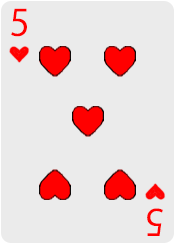
<style>
.page{position:relative;width:175px;height:244px;background:#ebebeb}
.page>*{position:absolute;margin:0}
.t1{font:36px "KozGoPr6N-Regular";color:#ff0000}
</style>
<div class="page">
<p class="t1" style="left:11px;top:8px;width:16px;height:29px">5</p>
<p class="t1" style="left:147px;top:208px;width:16px;height:28px;rotate:-180deg">5</p>
</div>
